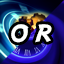
<style>
.page{position:relative;width:64px;height:64px}
.page>*{position:absolute;margin:0}
.t1{font:30px "Adventure";color:#ffffff}
</style>
<div class="page">
<p class="t1" style="left:11px;top:24px;width:41px;height:19px">o r</p>
</div>
